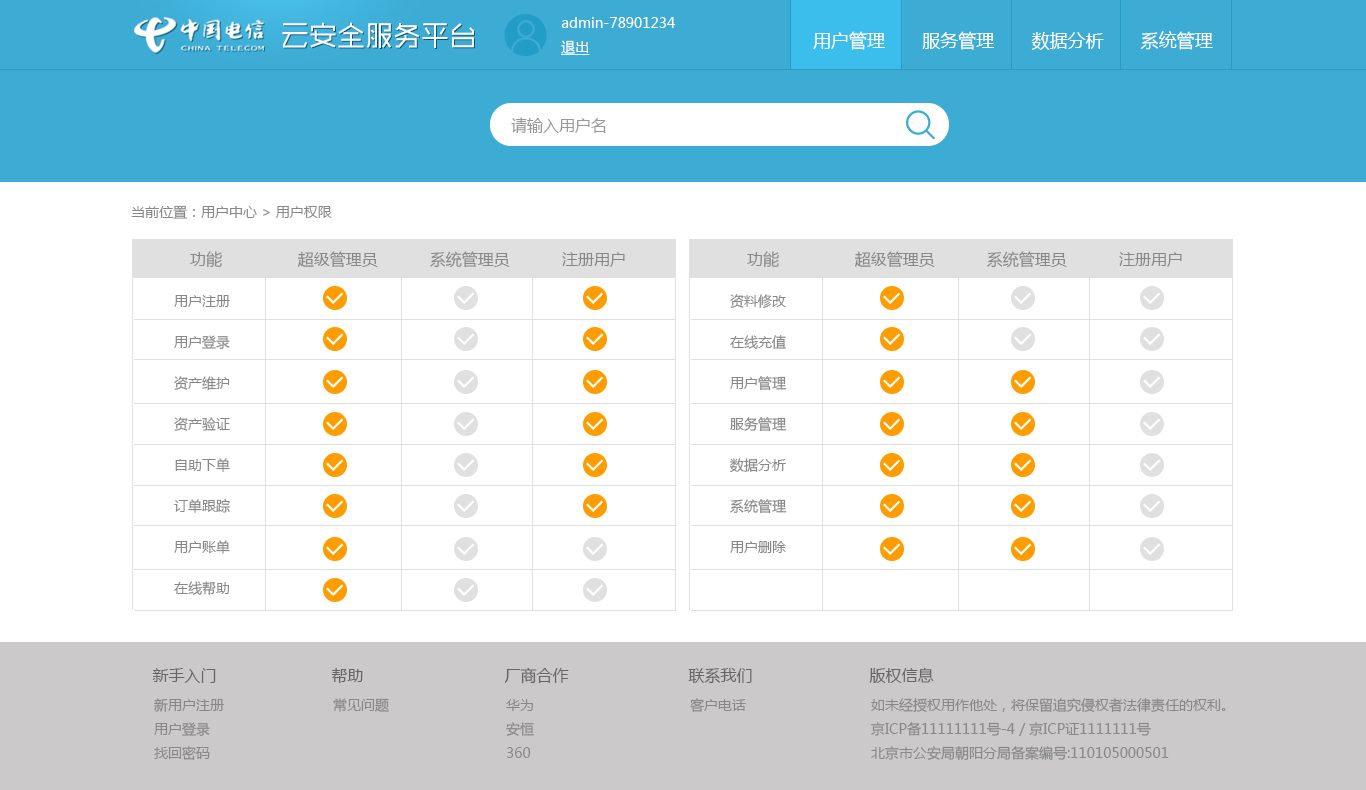
<style>
.page{position:relative;width:1366px;height:790px;background:#ffffff}
.page>*{position:absolute;margin:0}
.t1{font:14px/24px "MicrosoftYaHei";color:#ffffff}
.t2{font:14px/24px "MicrosoftYaHei";color:#ffffff;text-decoration:underline}
.t3{font:28px "MFShangHei_Noncommercial-Regular";color:#ffffff}
.t4{font:18px "MicrosoftYaHei";color:#ffffff}
.t5{font:16px "MicrosoftYaHei";color:#999999}
.t6{font:14px "MicrosoftYaHei";color:#888888}
.t7{font:16px "MicrosoftYaHei";color:#888888}
.t8{font:14px/41px "MicrosoftYaHei";color:#888888}
.t9{font:16px "MicrosoftYaHei";color:#666666}
.t10{font:14px/24px "MicrosoftYaHei";color:#888888}
</style>
<div class="page">
<p class="t1" style="left:561px;top:17px;width:114px;height:38px">admin-78901234<br><span class="t2">退出</span></p>
<p class="t3" style="left:282px;top:22px;width:192px;height:26px">云安全服务平台</p>
<p class="t4" style="left:813px;top:31px;width:400px;height:19px">用户管理       服务管理       数据分析       系统管理</p>
<p class="t5" style="left:511px;top:117px;width:95px;height:17px">请输入用户名</p>
<p class="t6" style="left:131px;top:205px;width:201px;height:14px">当前位置：用户中心 &gt; 用户权限</p>
<p class="t7" style="left:190px;top:251px;width:435px;height:17px">功能                超级管理员           系统管理员           注册用户</p>
<p class="t7" style="left:747px;top:251px;width:435px;height:17px">功能                超级管理员           系统管理员           注册用户</p>
<p class="t8" style="left:730px;top:294px;width:57px;height:259px">资料修改<br>在线充值<br>用户管理<br>服务管理<br>数据分析<br>系统管理<br>用户删除</p>
<p class="t8" style="left:174px;top:295px;width:56px;height:301px">用户注册<br>用户登录<br>资产维护<br>资产验证<br>自助下单<br>订单跟踪<br>用户账单<br>在线帮助</p>
<p class="t9" style="left:152px;top:668px;width:64px;height:15px">新手入门</p>
<p class="t9" style="left:331px;top:668px;width:32px;height:15px">帮助</p>
<p class="t9" style="left:504px;top:667px;width:65px;height:17px">厂商合作</p>
<p class="t9" style="left:688px;top:668px;width:64px;height:16px">联系我们</p>
<p class="t9" style="left:869px;top:667px;width:65px;height:16px">版权信息</p>
<p class="t10" style="left:154px;top:698px;width:70px;height:62px">新用户注册<br>用户登录<br>找回密码</p>
<p class="t6" style="left:333px;top:698px;width:56px;height:14px">常见问题</p>
<p class="t10" style="left:506px;top:699px;width:28px;height:59px">华为<br>安恒<br>360</p>
<p class="t6" style="left:690px;top:698px;width:56px;height:14px">客户电话</p>
<p class="t10" style="left:871px;top:698px;width:355px;height:63px">如未经授权用作他处，将保留追究侵权者法律责任的权利。<br>京ICP备11111111号-4 / 京ICP证1111111号<br>北京市公安局朝阳分局备案编号:110105000501</p>
</div>
